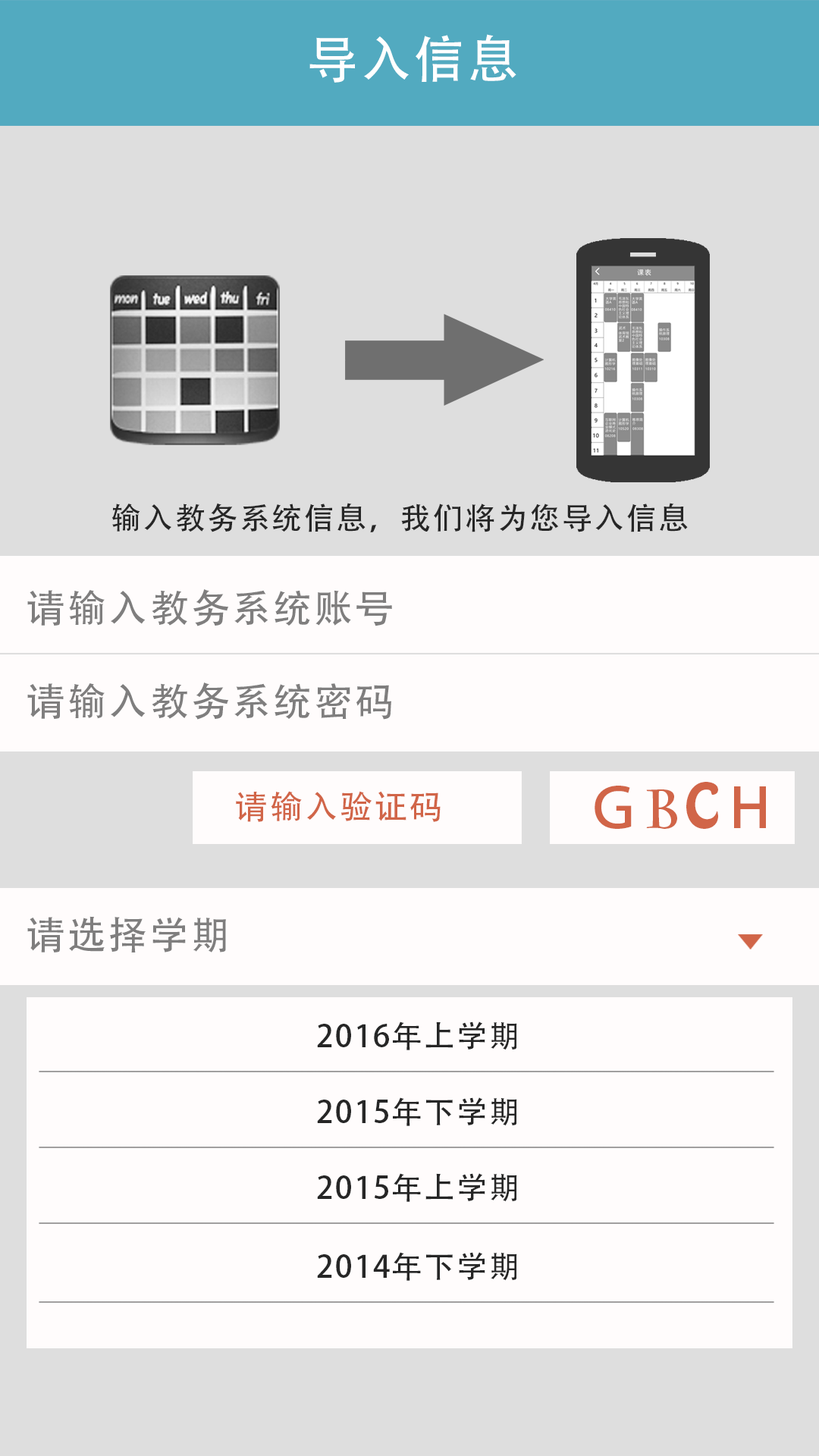
<style>
.page{position:relative;width:819px;height:1456px;background:#fffcfc}
.page>*{position:absolute;margin:0}
.t1{font:50.8px "AdobeHeitiStd-Regular";letter-spacing:0.06em;color:#ffffff}
.t2{font:30.4px "AdobeHeitiStd-Regular";letter-spacing:0.06em;color:#262626}
.t3{font:38.7px "AdobeHeitiStd-Regular";letter-spacing:0.06em;color:#7f7e7e}
.t4{font:54.6px "AdobeHeitiStd-Regular";letter-spacing:0.06em;color:#d16548}
.t5{font:54.6px "CharlemagneStd-Bold";letter-spacing:0.06em;color:#d16548}
.t6{font:54.6px "HoboStd";letter-spacing:0.06em;color:#d16548}
.t7{font:32.8px "AdobeHeitiStd-Regular";letter-spacing:0.06em;color:#d16548}
.t8{font:30.7px "AdobeHeitiStd-Regular";letter-spacing:0.06em;color:#262626}
</style>
<div class="page">
<p class="t1" style="left:309px;top:34px;width:207px;height:49px">导入信息</p>
<p class="t2" style="left:111px;top:503px;width:577px;height:29px">输入教务系统信息，我们将为您导入信息</p>
<p class="t3" style="left:27px;top:589px;width:365px;height:37px">请输入教务系统账号</p>
<p class="t3" style="left:27px;top:682px;width:364px;height:38px">请输入教务系统密码</p>
<p class="t4" style="left:595px;top:782px;width:171px;height:47px">Ｇ<span class="t5">B</span><span class="t6">C</span>Ｈ</p>
<p class="t7" style="left:236px;top:791px;width:205px;height:31px">请输入验证码</p>
<p class="t3" style="left:27px;top:916px;width:199px;height:36px">请选择学期</p>
<p class="t8" style="left:317px;top:1021px;width:200px;height:29px">2016年上学期</p>
<p class="t8" style="left:317px;top:1097px;width:200px;height:29px">2015年下学期</p>
<p class="t8" style="left:317px;top:1173px;width:200px;height:29px">2015年上学期</p>
<p class="t8" style="left:317px;top:1252px;width:200px;height:29px">2014年下学期</p>
</div>
